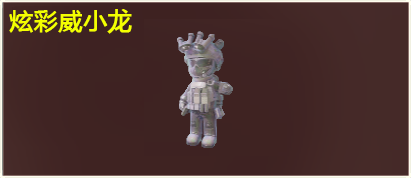
<style>
.page{position:relative;width:411px;height:178px}
.page>*{position:absolute;margin:0}
.t1{font:24px "MicrosoftYaHeiUI";color:#f4ff00;font-weight:bold}
</style>
<div class="page">
<p class="t1" style="left:9px;top:9px;width:123px;height:25px">炫彩威小龙</p>
</div>
